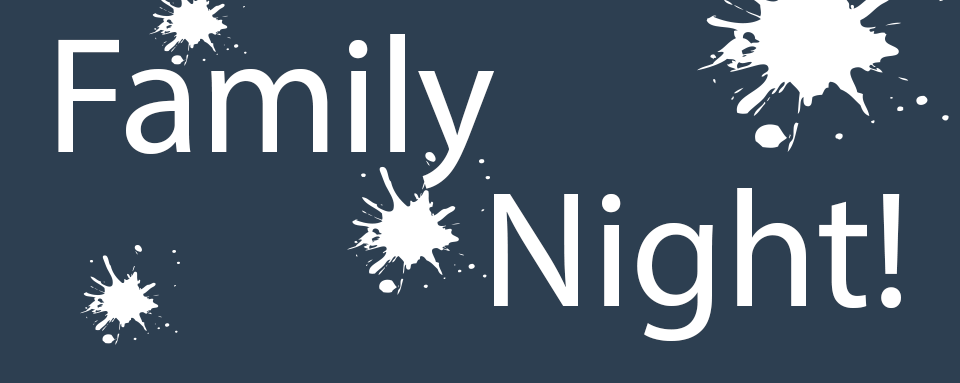
<style>
.page{position:relative;width:960px;height:383px;background:#2d3f51}
.page>*{position:absolute;margin:0}
.t1{font:166.7px "MyriadPro-Regular";color:#ffffff}
</style>
<div class="page">
<p class="t1" style="left:58px;top:34px;width:436px;height:155px">Family</p>
<p class="t1" style="left:494px;top:188px;width:407px;height:153px">Night!</p>
</div>
